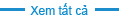
<style>
.page{position:relative;width:119px;height:17px;background:#ffffff}
.page>*{position:absolute;margin:0}
.t1{font:12px "ArialMT";color:#0d8ccf}
</style>
<div class="page">
<p class="t1" style="left:30px;top:3px;width:58px;height:12px">Xem tất cả</p>
</div>
